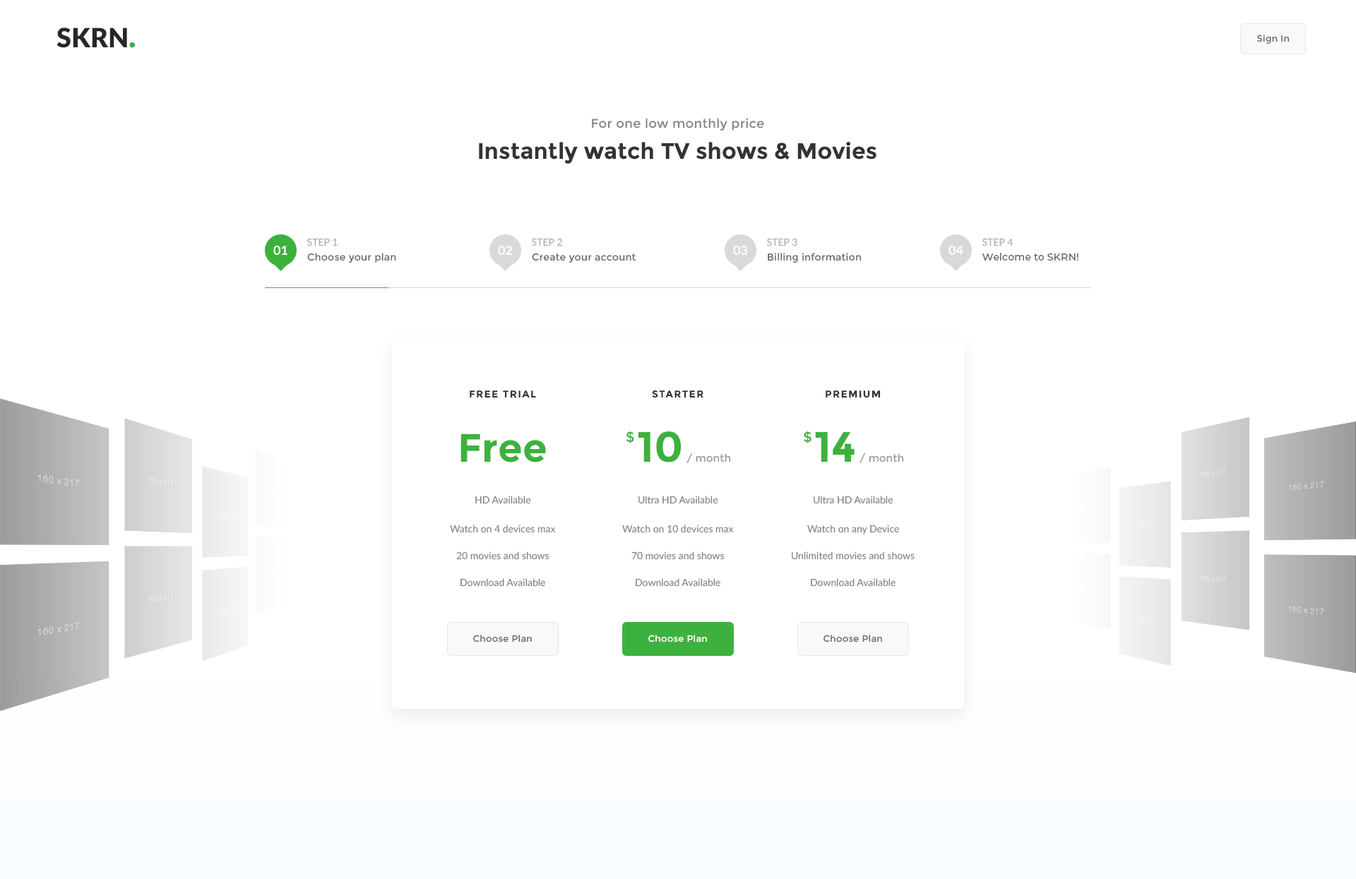
<style>
.page{position:relative;width:1356px;height:879px;background:#ffffff}
.page>*{position:absolute;margin:0}
.t1{font:26.6px "Lato-Black";color:#272727}
.t2{font:31.1px "Lato-Black";color:#3db13d}
.t3{font:9.2px "Montserrat-Regular";letter-spacing:0.02em;color:#666666}
.t4{font:12.7px "Montserrat-Regular";letter-spacing:0.017em;color:#848484}
.t5{font:22.6px "Montserrat-Bold";color:#333333}
.t6{font:12.7px "Lato-Bold";color:#ffffff;text-transform:uppercase}
.t7{font:9.9px "Lato-Regular";color:#adadad}
.t8{font:9.9px "Montserrat-Regular";letter-spacing:0.015em;color:#666666}
.t9{font:9.9px "Montserrat-Medium";letter-spacing:0.015em;color:#666666}
.t10{font:9.9px "Montserrat-Bold";letter-spacing:0.1em;color:#333333;text-transform:uppercase}
.t11{font:39.6px "Montserrat-Bold";color:#3db13d}
.t12{font:14.1px "Montserrat-Regular";color:#3db13d}
.t13{font:10.6px "Montserrat-Regular";color:#999999}
.t14{font:42.4px "Montserrat-Bold";color:#3db13d}
.t15{font:14.2px "Montserrat-Regular";color:#3db13d}
.t16{font:42.5px "Montserrat-Bold";color:#3db13d}
.t17{font:9.9px "Lato-Regular";color:#848484}
.t18{font:9.2px "Montserrat-Regular";letter-spacing:0.02em;color:#ffffff}
</style>
<div class="page">
<p class="t1" style="left:57px;top:28px;width:79px;height:20px">SKRN<span class="t2">.</span></p>
<p class="t3" style="left:1257px;top:35px;width:33px;height:9px">Sign In</p>
<p class="t4" style="left:592px;top:118px;width:172px;height:13px">For one low monthly price</p>
<p class="t5" style="left:479px;top:141px;width:398px;height:23px">Instantly watch TV shows &amp; Movies</p>
<p class="t6" style="left:273px;top:245px;width:14px;height:11px">01</p>
<p class="t7" style="left:307px;top:238px;width:31px;height:8px">STEP 1</p>
<p class="t6" style="left:498px;top:245px;width:14px;height:11px">02</p>
<p class="t7" style="left:531px;top:238px;width:31px;height:8px">STEP 2</p>
<p class="t6" style="left:733px;top:245px;width:14px;height:11px">03</p>
<p class="t7" style="left:766px;top:238px;width:31px;height:8px">STEP 3</p>
<p class="t6" style="left:949px;top:245px;width:14px;height:11px">04</p>
<p class="t7" style="left:982px;top:238px;width:32px;height:8px">STEP 4</p>
<p class="t8" style="left:307px;top:253px;width:89px;height:10px">Choose your plan</p>
<p class="t8" style="left:532px;top:253px;width:104px;height:10px">Create your account</p>
<p class="t8" style="left:768px;top:253px;width:94px;height:10px">Billing information</p>
<p class="t9" style="left:982px;top:253px;width:97px;height:8px">Welcome to SKRN!</p>
<p class="t10" style="left:652px;top:390px;width:51px;height:8px">starter</p>
<p class="t10" style="left:470px;top:391px;width:66px;height:7px">FREE TRIAL</p>
<p class="t10" style="left:826px;top:391px;width:55px;height:7px">premium</p>
<p class="t11" style="left:460px;top:434px;width:86px;height:29px">Free</p>
<p class="t12" style="left:626px;top:431px;width:8px;height:13px">$</p>
<p class="t13" style="left:638px;top:432px;width:93px;height:31px"><span class="t14">10</span> / month</p>
<p class="t15" style="left:804px;top:431px;width:8px;height:13px">$</p>
<p class="t13" style="left:815px;top:432px;width:89px;height:31px"><span class="t16">14</span> / month</p>
<p class="t17" style="left:475px;top:496px;width:56px;height:8px">HD Available</p>
<p class="t17" style="left:638px;top:496px;width:80px;height:8px">Ultra HD Available</p>
<p class="t17" style="left:814px;top:496px;width:79px;height:8px">Ultra HD Available</p>
<p class="t17" style="left:450px;top:525px;width:106px;height:8px">Watch on 4 devices max</p>
<p class="t17" style="left:622px;top:525px;width:112px;height:8px">Watch on 10 devices max</p>
<p class="t17" style="left:807px;top:525px;width:92px;height:10px">Watch on any Device</p>
<p class="t17" style="left:456px;top:552px;width:93px;height:8px">20 movies and shows</p>
<p class="t17" style="left:631px;top:552px;width:94px;height:8px">70 movies and shows</p>
<p class="t17" style="left:792px;top:552px;width:123px;height:8px">Unlimited movies and shows</p>
<p class="t17" style="left:460px;top:578px;width:85px;height:9px">Download Available</p>
<p class="t17" style="left:636px;top:578px;width:84px;height:9px">Download Available</p>
<p class="t17" style="left:811px;top:578px;width:85px;height:9px">Download Available</p>
<p class="t3" style="left:473px;top:635px;width:59px;height:8px">Choose Plan</p>
<p class="t18" style="left:648px;top:635px;width:59px;height:8px">Choose Plan</p>
<p class="t3" style="left:824px;top:635px;width:58px;height:8px">Choose Plan</p>
</div>
